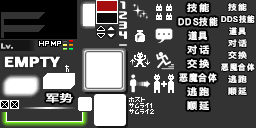
<style>
.page{position:relative;width:256px;height:128px;background:#333333}
.page>*{position:absolute;margin:0}
.t1{font:9.3px/14px "DFKingGothicSC14-Semibold";letter-spacing:0.125em;color:#fefefe;scale:0.93 1}
.t2{font:9.3px/14px "DFKingGothicSC14-Semibold";letter-spacing:0.125em;color:#fefefe;scale:1.1 1}
.t3{font:9.3px/14px "DFKingGothicSC14-Semibold";letter-spacing:0.125em;color:#fefefe}
.t4{font:9.3px/14px "DFKingGothicSC14-Semibold";letter-spacing:0.125em;color:#fefefe;scale:0.94 1}
.t5{font:8px/12px "DFKingGothicSC14-Semibold";letter-spacing:0.125em;color:#fefefe;scale:0.93 1}
.t6{font:8px/12px "DFKingGothicSC14-Semibold";letter-spacing:0.125em;color:#fefefe;scale:1.1 1}
.t7{font:8px/12px "DFKingGothicSC14-Semibold";letter-spacing:0.125em;color:#fefefe}
.t8{font:8px/12px "DFKingGothicSC14-Semibold";letter-spacing:0.125em;color:#fefefe;scale:0.94 1}
.t9{font:10.7px "HYWenHei-FEW";letter-spacing:-0.015em;color:#ffffff;scale:1.3 1}
</style>
<div class="page">
<p class="t1" style="left:178px;top:3px;width:40px;height:107px;text-align:center"><span class="t2">技能<br></span>DDS技能<br><span class="t3">道具<br></span><span class="t2">对话<br>交換<br></span><span class="t4">恶魔合体<br></span><span class="t2">逃跑<br>順延</span></p>
<p class="t5" style="left:221px;top:3px;width:34px;height:92px;text-align:center"><span class="t6">技能<br></span>DDS技能<br><span class="t7">道具<br></span><span class="t6">对话<br>交換<br></span><span class="t8">恶魔合体<br></span><span class="t6">逃跑<br>順延</span></p>
<p class="t9" style="left:46px;top:93px;width:27px;height:10px">军势</p>
</div>
